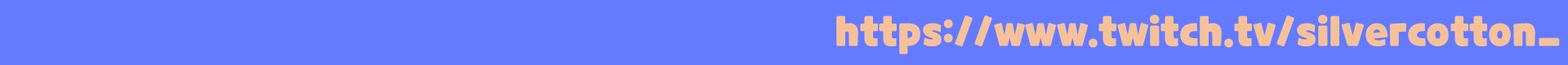
<style>
.page{position:relative;width:1568px;height:65px;background:#647bff}
.page>*{position:absolute;margin:0}
.t1{font:40.8px "CookieRunOTF-Black";color:#f6c199}
</style>
<div class="page">
<p class="t1" style="left:836px;top:15px;width:724px;height:40px">https://www.twitch.tv/silvercotton_</p>
</div>
